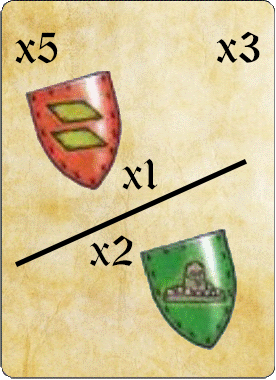
<style>
.page{position:relative;width:276px;height:380px}
.page>*{position:absolute;margin:0}
.t1{font:50px "OldLondon";color:#000000}
</style>
<div class="page">
<p class="t1" style="left:15px;top:32px;width:43px;height:32px">x5</p>
<p class="t1" style="left:216px;top:31px;width:44px;height:32px">x3</p>
<p class="t1" style="left:122px;top:158px;width:36px;height:32px">x1</p>
<p class="t1" style="left:89px;top:235px;width:44px;height:32px">x2</p>
</div>
